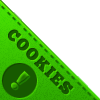
<style>
.page{position:relative;width:100px;height:100px;background:#ffffff}
.page>*{position:absolute;margin:0}
.t1{font:16px "ChunkFive-Roman";letter-spacing:0.1em;color:#185e00;text-transform:uppercase}
.t2{font:30px "ChunkFive-Roman";letter-spacing:0.2em;text-transform:uppercase}
</style>
<div class="page">
<p class="t1" style="left:8px;top:29px;width:66px;height:66px;rotate:45deg">Cookies</p>
<p class="t2" style="left:11px;top:70px;width:19px;height:20px;rotate:45deg">!</p>
</div>
